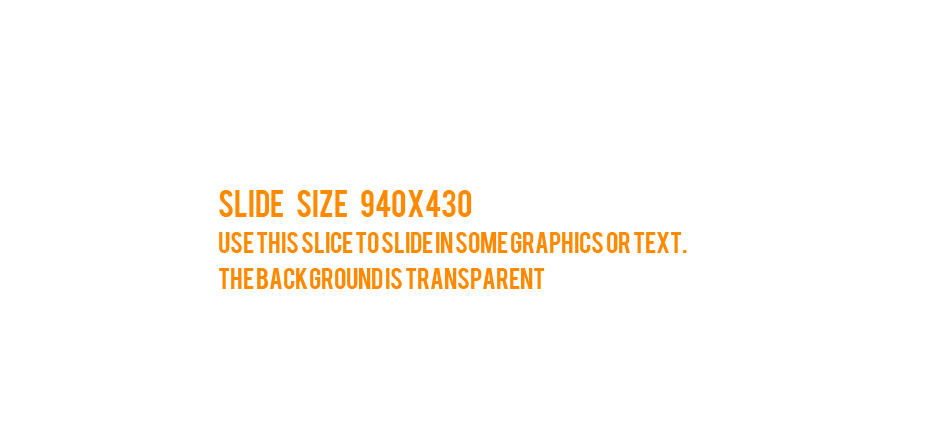
<style>
.page{position:relative;width:940px;height:430px;background:#ffffff}
.page>*{position:absolute;margin:0}
.t1{font:24px/36px "Bebas";color:#ff8a00}
.t2{font:30px/48px "Bebas";color:#ff8a00}
</style>
<div class="page">
<p class="t1" style="left:219px;top:190px;width:468px;height:99px"><span class="t2">slide    size    940x430<br></span>Use this Slice to slide in some graphics or text.<br>the background is transparent</p>
</div>
